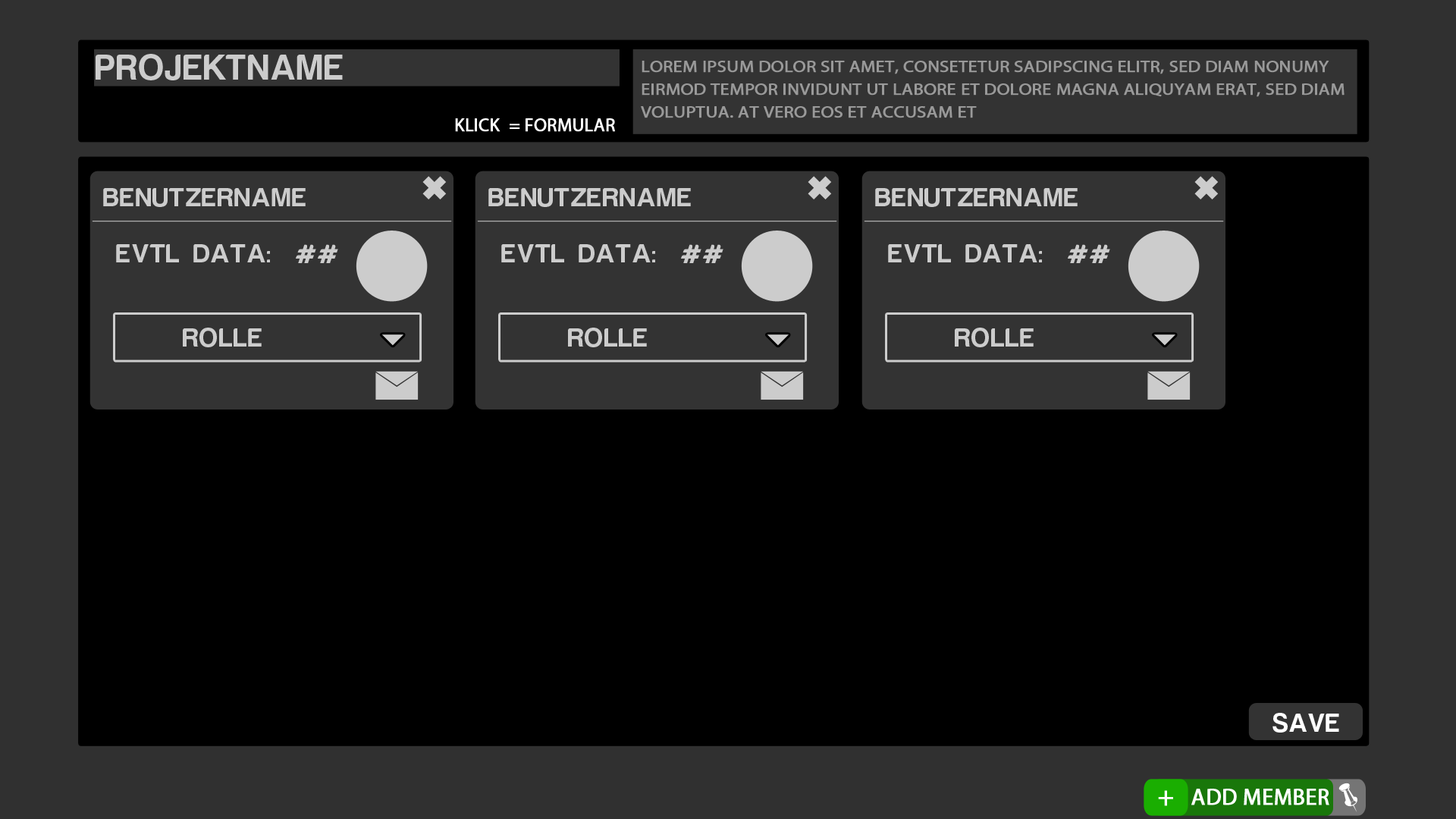
<style>
.page{position:relative;width:1456px;height:819px;background:#000000}
.page>*{position:absolute;margin:0}
.t1{font:36.4px "HarabaraMaisBold-HarabaraMaisBold";color:#cccccc;text-transform:uppercase}
.t2{font:16.9px/22.9px "MyriadPro-Regular";color:#999999;text-transform:uppercase;font-weight:bold;scale:1.08 1}
.t3{font:18.2px "MyriadPro-Regular";color:#ffffff;text-transform:uppercase;font-weight:bold}
.t4{font:27.3px "HarabaraMaisBold-HarabaraMaisBold";color:#cccccc;text-transform:uppercase}
.t5{font:26.8px "HarabaraMaisBold-HarabaraMaisBold";color:#ffffff;text-transform:uppercase}
.t6{font:27.3px "MyriadPro-Regular";color:#ffffff;text-transform:uppercase;font-weight:bold}
.t7{font:22.7px "MyriadPro-Regular";color:#ffffff;text-transform:uppercase;font-weight:bold}
</style>
<div class="page">
<p class="t1" style="left:96px;top:54px;width:247px;height:26px">ProjektName</p>
<p class="t2" style="left:641px;top:61px;width:704px;height:57px">Lorem ipsum dolor sit amet, consetetur sadipscing elitr, sed diam nonumy eirmod tempor invidunt ut labore et dolore magna aliquyam erat, sed diam voluptua. At vero eos et accusam et</p>
<p class="t3" style="left:455px;top:118px;width:160px;height:14px">Klick  = Formular</p>
<p class="t4" style="left:103px;top:188px;width:203px;height:19px">Benutzername</p>
<p class="t4" style="left:488px;top:188px;width:203px;height:19px">Benutzername</p>
<p class="t4" style="left:875px;top:188px;width:203px;height:19px">Benutzername</p>
<p class="t4" style="left:116px;top:244px;width:154px;height:18px">evtl Data:</p>
<p class="t4" style="left:296px;top:244px;width:42px;height:19px">##</p>
<p class="t4" style="left:501px;top:244px;width:154px;height:18px">evtl Data:</p>
<p class="t4" style="left:681px;top:244px;width:42px;height:19px">##</p>
<p class="t4" style="left:888px;top:244px;width:154px;height:18px">evtl Data:</p>
<p class="t4" style="left:1068px;top:244px;width:42px;height:19px">##</p>
<p class="t4" style="left:183px;top:328px;width:79px;height:19px">Rolle</p>
<p class="t4" style="left:568px;top:328px;width:79px;height:19px">Rolle</p>
<p class="t4" style="left:955px;top:328px;width:79px;height:19px">Rolle</p>
<p class="t5" style="left:1272px;top:713px;width:67px;height:20px">Save</p>
<p class="t6" style="left:1158px;top:790px;width:15px;height:16px">+</p>
<p class="t7" style="left:1191px;top:789px;width:138px;height:16px">add member</p>
</div>
